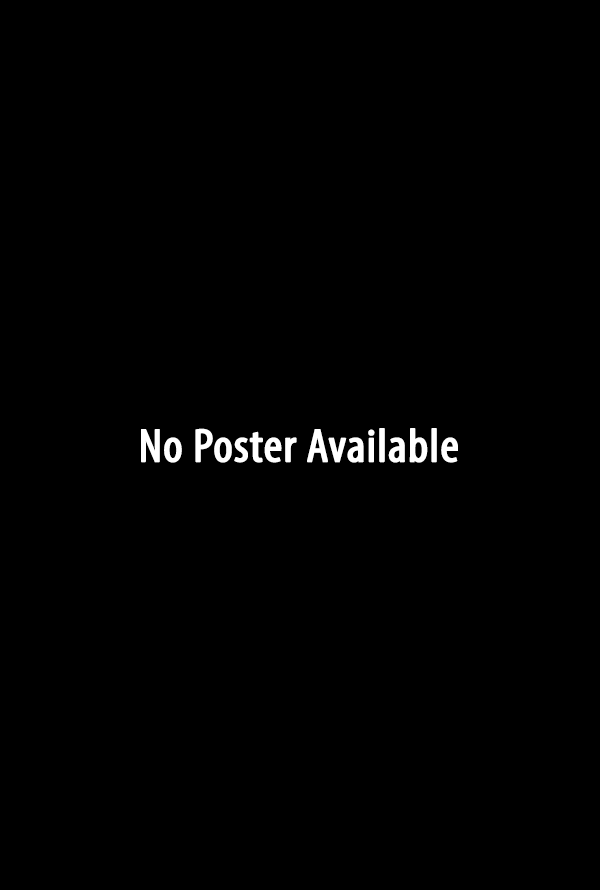
<style>
.page{position:relative;width:600px;height:890px;background:#000000}
.page>*{position:absolute;margin:0}
.t1{font:47px "MyriadPro-Cond";color:#ffffff;font-weight:bold;scale:1.07 1}
</style>
<div class="page">
<p class="t1" style="left:141px;top:428px;width:317px;height:35px">No Poster Available</p>
</div>
